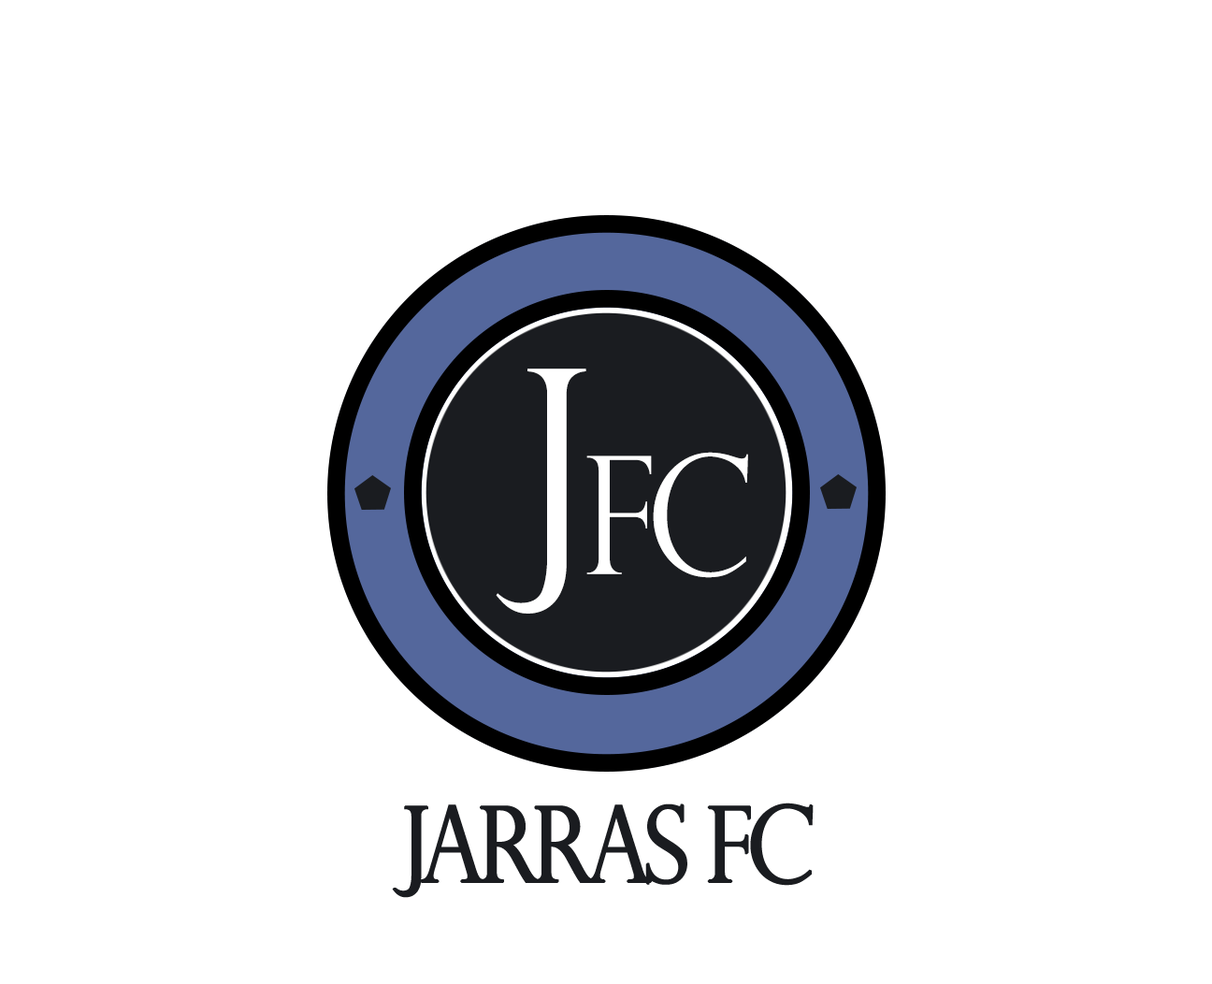
<style>
.page{position:relative;width:1212px;height:984px;background:#ffffff}
.page>*{position:absolute;margin:0}
.t1{font:285.5px "PerpetuaTitlingMT-Light";letter-spacing:0.28em;color:#ffffff;scale:0.9 1}
.t2{font:163.9px "PerpetuaTitlingMT-Light";letter-spacing:-0.08em;color:#ffffff;scale:0.9 1}
.t3{font:103.8px "PerpetuaTitlingMT-Light";letter-spacing:-0.1em;color:#1a1c20;font-weight:bold;scale:0.9 1}
</style>
<div class="page">
<p class="t1" style="left:496px;top:368px;width:90px;height:245px">J</p>
<p class="t2" style="left:586px;top:452px;width:162px;height:126px">FC</p>
<p class="t3" style="left:392px;top:802px;width:422px;height:96px">jarras fc</p>
</div>
